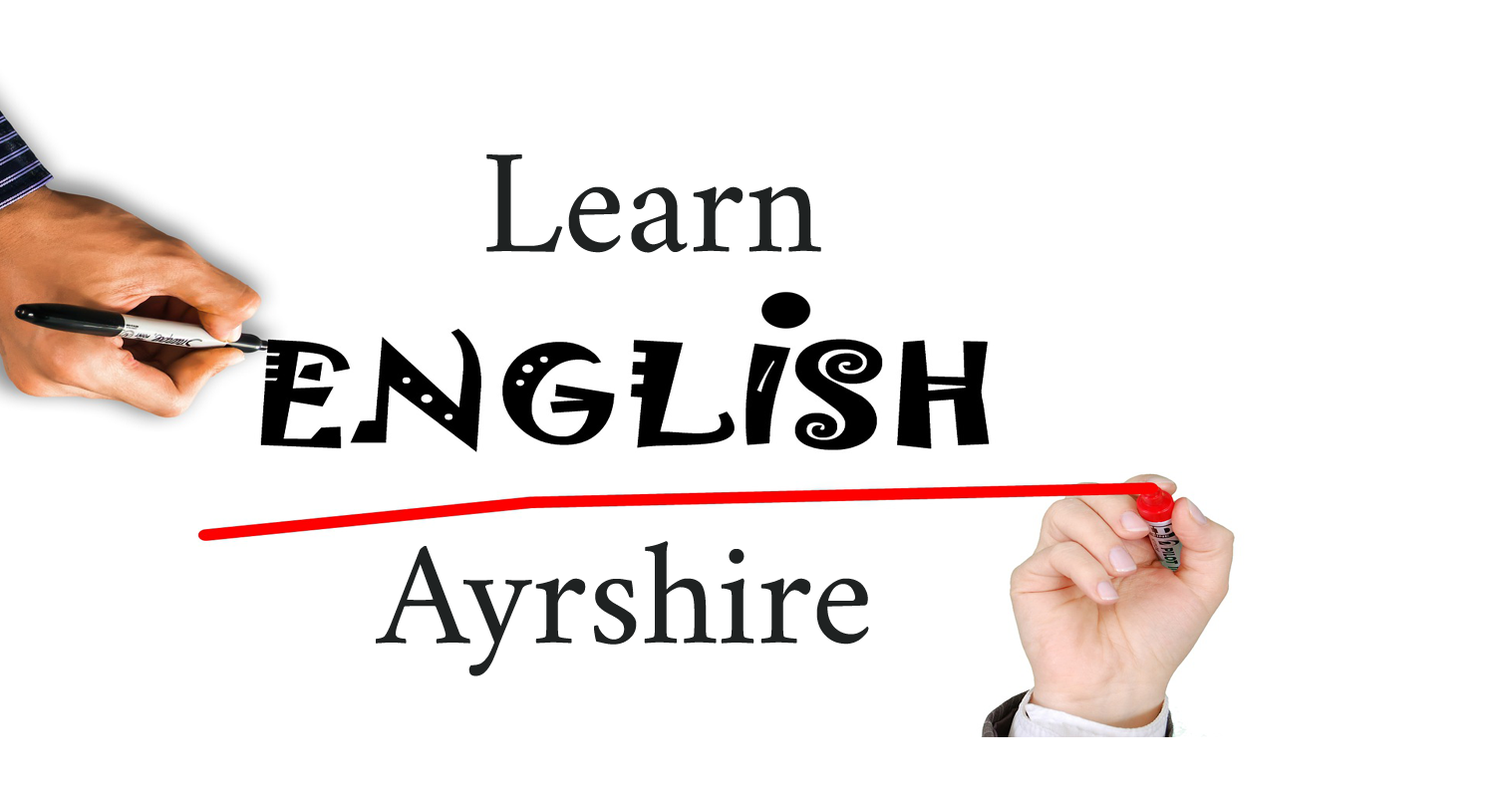
<style>
.page{position:relative;width:1495px;height:797px;background:#ffffff}
.page>*{position:absolute;margin:0}
.t1{font:149.5px "Amiri-Regular";color:#1f2222}
.t2{font:199.4px "Amiri-Regular";color:#1f2222}
</style>
<div class="page">
<p class="t1" style="left:486px;top:155px;width:335px;height:98px">Learn</p>
<p class="t1" style="left:376px;top:541px;width:493px;height:136px"><span class="t2">         </span>Ayrshire</p>
</div>
